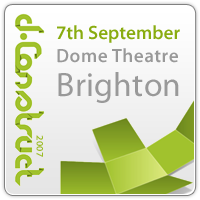
<style>
.page{position:relative;width:200px;height:200px}
.page>*{position:absolute;margin:0}
.t1{font:19.3px "MyriadPro-Semibold";color:#89ac10}
.t2{font:19.3px "MyriadPro-Semibold";letter-spacing:0.025em;color:#999999}
.t3{font:33.7px/33.7px "MyriadPro-Regular";letter-spacing:0.01em;color:#999999}
.t4{font:10px "MyriadPro-Semibold";letter-spacing:0.025em;color:#9cbc26}
</style>
<div class="page">
<p class="t1" style="left:57px;top:25px;width:123px;height:78px">7th September<br><span class="t2">Dome Theatre<br></span><span class="t3">Brighton</span></p>
<p class="t4" style="left:36px;top:135px;width:7px;height:22px;rotate:90deg">2007</p>
</div>
